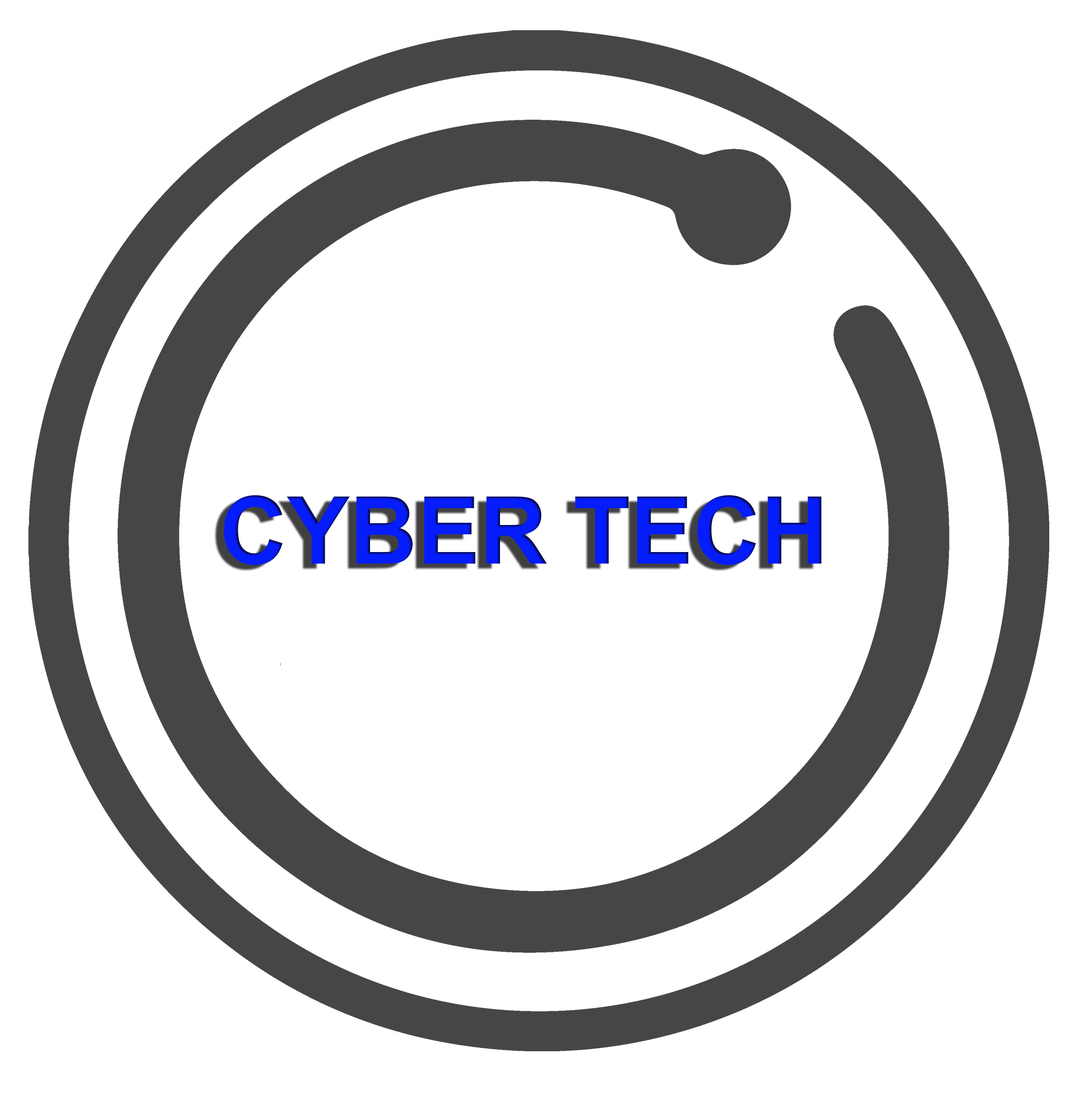
<style>
.page{position:relative;width:1087px;height:1097px;background:#ffffff}
.page>*{position:absolute;margin:0}
.t1{font:93.5px "Arial-BoldMT";color:#061dfb}
</style>
<div class="page">
<p class="t1" style="left:224px;top:495px;width:598px;height:70px">CYBER TECH</p>
</div>
